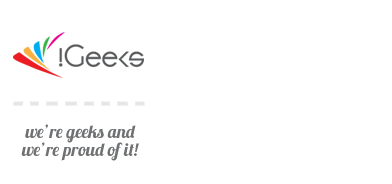
<style>
.page{position:relative;width:392px;height:184px;background:#ffffff}
.page>*{position:absolute;margin:0}
.t1{font:18px/18px "Lobster1.3";color:#707173}
</style>
<div class="page">
<p class="t1" style="left:21px;top:124px;width:118px;height:37px;text-align:center">we’re geeks and<br>we’re proud of it!</p>
</div>
